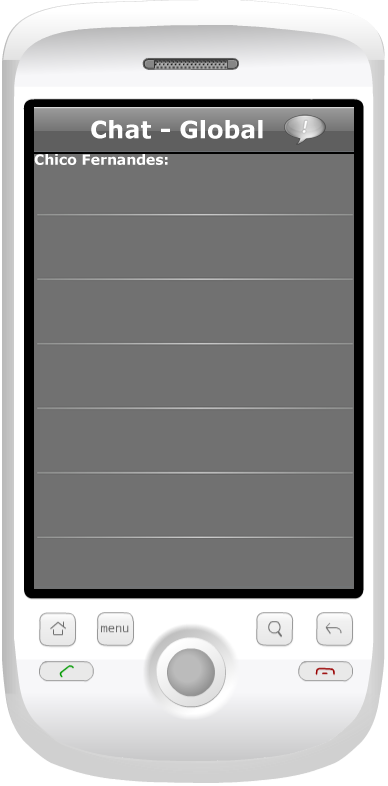
<style>
.page{position:relative;width:388px;height:786px;background:#717171}
.page>*{position:absolute;margin:0}
.t1{font:24px "Verdana-Bold";color:#ffffff}
.t2{font:14px "Verdana-Bold";color:#ffffff}
</style>
<div class="page">
<p class="t1" style="left:91px;top:120px;width:172px;height:19px">Chat - Global</p>
<p class="t2" style="left:34px;top:154px;width:134px;height:11px">Chico Fernandes:</p>
</div>
